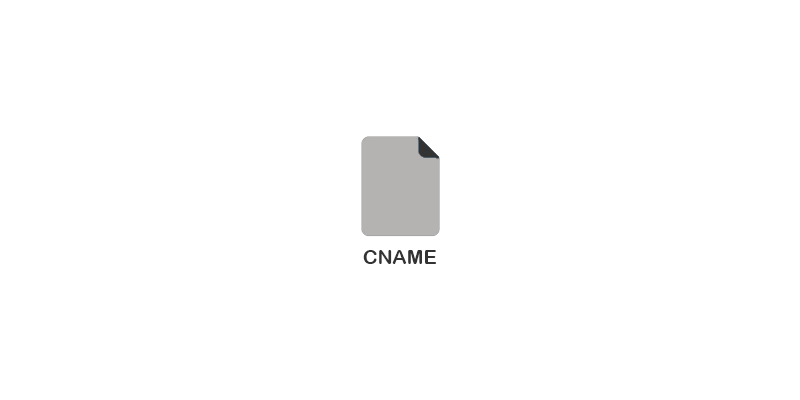
<style>
.page{position:relative;width:800px;height:400px;background:#ffffff}
.page>*{position:absolute;margin:0}
.t1{font:20px "ArialRoundedMTBold";color:#333333;text-transform:uppercase}
</style>
<div class="page">
<p class="t1" style="left:363px;top:250px;width:74px;height:14px">CNAME</p>
</div>
